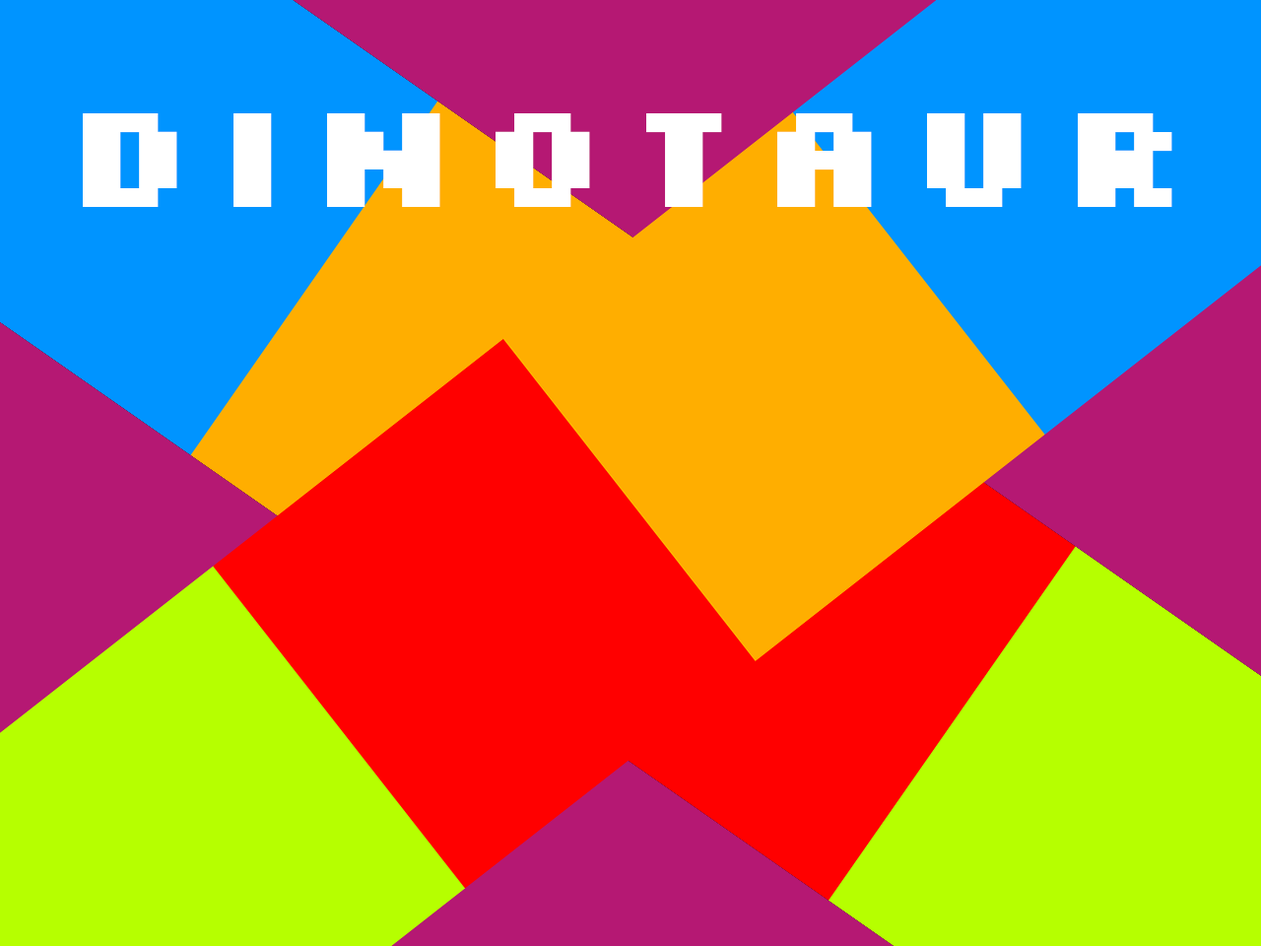
<style>
.page{position:relative;width:1261px;height:946px}
.page>*{position:absolute;margin:0}
.t1{font:157.6px "Silkscreen-ExpandedBold";color:#ffffff}
</style>
<div class="page">
<p class="t1" style="left:83px;top:113px;width:1089px;height:94px">DINOTAUR</p>
</div>
